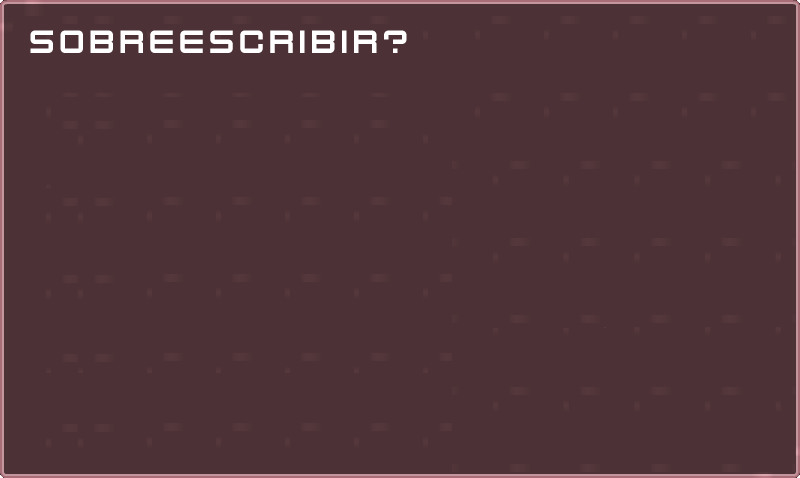
<style>
.page{position:relative;width:800px;height:478px;background:#4c3236}
.page>*{position:absolute;margin:0}
.t1{font:36px "KenVector-Future";color:#ffffff}
</style>
<div class="page">
<p class="t1" style="left:30px;top:30px;width:377px;height:23px">sobreescribir?</p>
</div>
